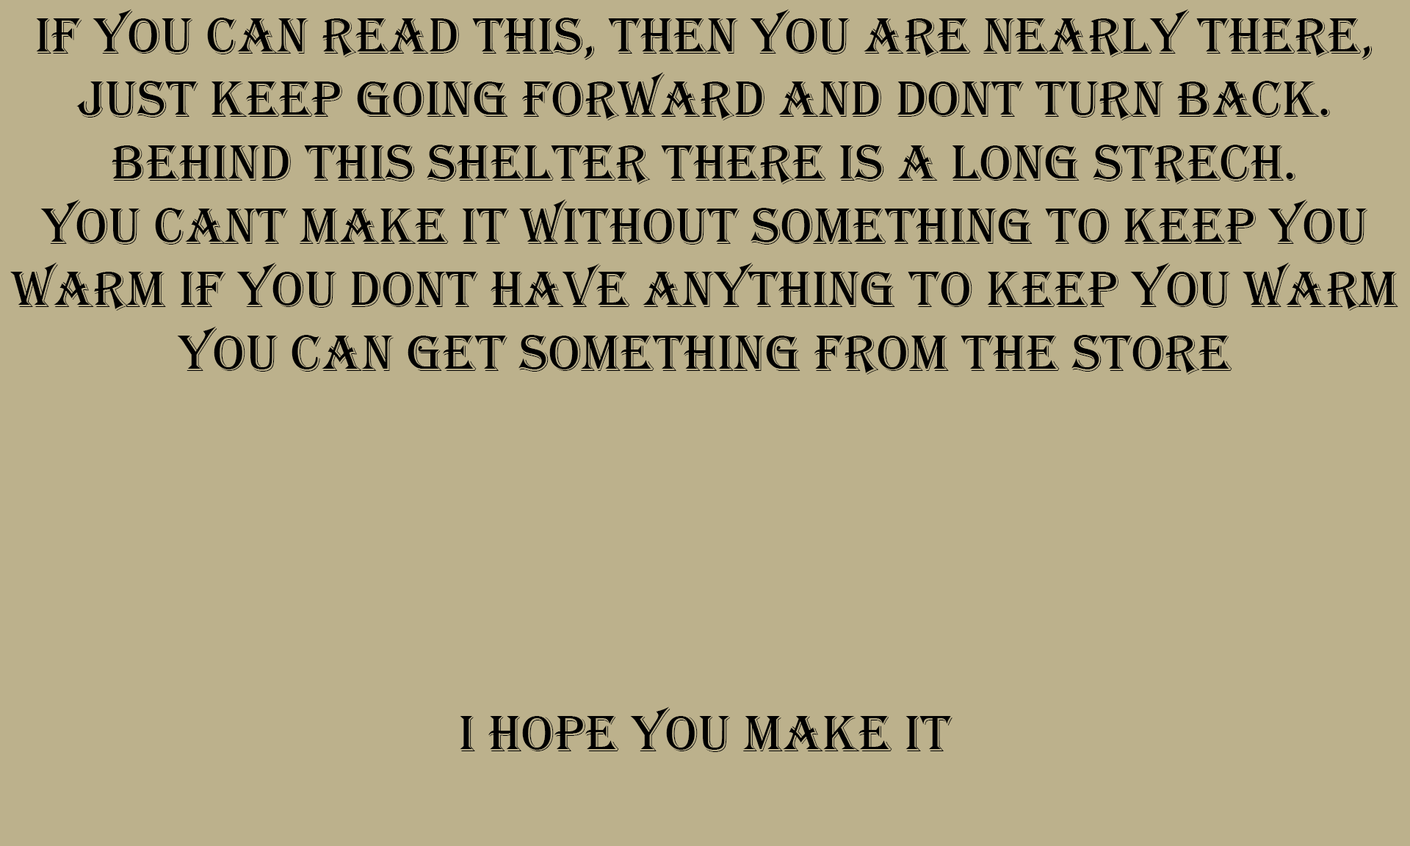
<style>
.page{position:relative;width:1410px;height:846px;background:#bcb18c}
.page>*{position:absolute;margin:0}
.t1{font:52.9px "Algerian";color:#000000}
</style>
<div class="page">
<p class="t1" style="left:10px;top:9px;width:1388px;height:743px;text-align:center">If you can read this, then you are nearly there, just keep going forward and DONT turn back.<br>Behind this shelter there is a long strech. <br>you cant make it without something to keep you warm if you dont have anything to keep you warm you can get something from the store<br><br><br><br><br><br>i hope you make it</p>
</div>
